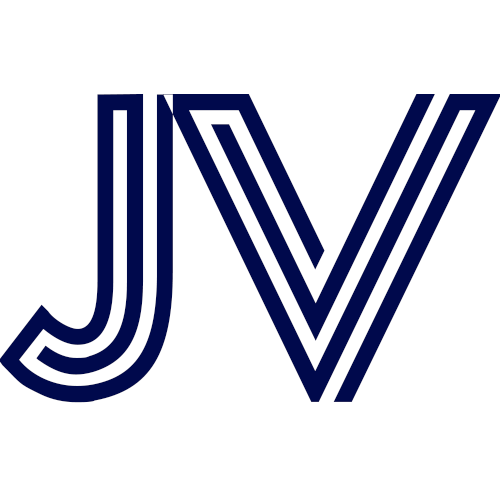
<style>
.page{position:relative;width:500px;height:500px;background:#ffffff}
.page>*{position:absolute;margin:0}
.t1{font:440px "ArgonPERSONAL-Regular";letter-spacing:-0.1em;color:#00094c}
</style>
<div class="page">
<p class="t1" style="left:0px;top:93px;width:502px;height:310px">JV</p>
</div>
